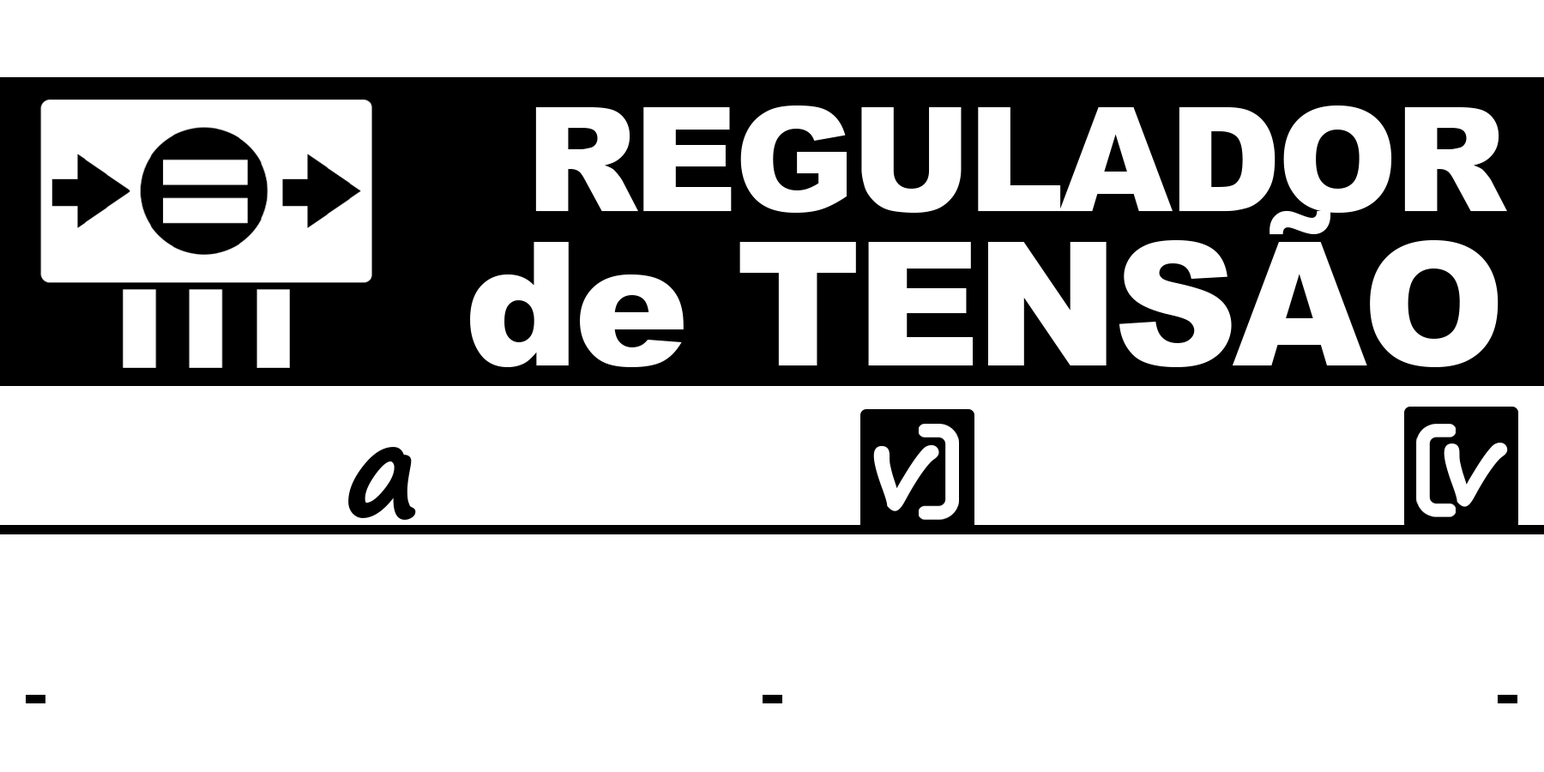
<style>
.page{position:relative;width:1544px;height:772px;background:#ffffff}
.page>*{position:absolute;margin:0}
.t1{font:145.3px/154.4px "Arial-Black";letter-spacing:-0.03em;color:#ffffff}
.t2{font:172.5px/154.4px "Arial-Black";letter-spacing:-0.03em;color:#ffffff}
.t3{font:127.1px "SegoePrint-Bold";letter-spacing:-0.15em;color:#000000;font-weight:bold}
.t4{font:113.3px "SegoePrint-Bold";letter-spacing:-0.15em;color:#ffffff;font-weight:bold}
.t5{font:109.7px "SegoePrint-Bold";letter-spacing:-0.15em;color:#ffffff;font-weight:bold}
</style>
<div class="page">
<p class="t1" style="left:470px;top:106px;width:1037px;height:261px;text-align:right">REGULADOR<br><span class="t2">de TENSÃO</span></p>
<p class="t3" style="left:348px;top:447px;width:68px;height:73px">a</p>
<p class="t4" style="left:873px;top:444px;width:66px;height:67px">v</p>
<p class="t5" style="left:1444px;top:443px;width:64px;height:64px">v</p>
</div>
